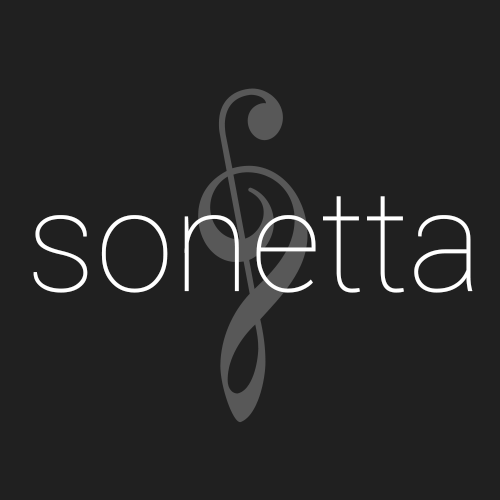
<style>
.page{position:relative;width:500px;height:500px;background:#202020}
.page>*{position:absolute;margin:0}
.t1{font:140.8px "Roboto-Thin";color:#ffffff}
</style>
<div class="page">
<p class="t1" style="left:33px;top:196px;width:440px;height:97px">sonetta</p>
</div>
